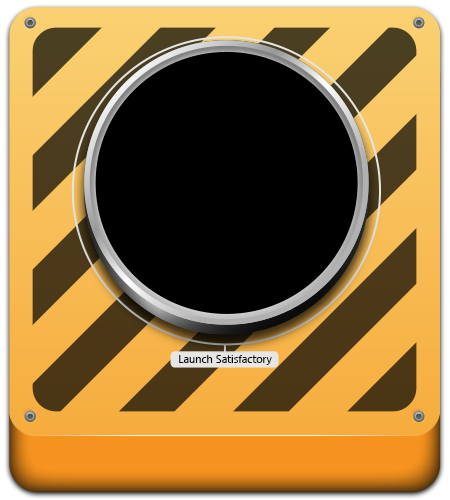
<style>
.page{position:relative;width:450px;height:500px;background:#000000}
.page>*{position:absolute;margin:0}
.t1{font:11px "SegoeUI";color:#000000}
</style>
<div class="page">
<p class="t1" style="left:179px;top:355px;width:93px;height:10px">Launch Satisfactory</p>
</div>
